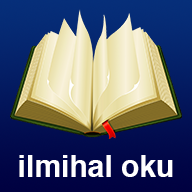
<style>
.page{position:relative;width:192px;height:192px}
.page>*{position:absolute;margin:0}
.t1{font:30px "Helvetica-Bold";color:#ffffff}
</style>
<div class="page">
<p class="t1" style="left:19px;top:155px;width:154px;height:22px">ilmihal oku</p>
</div>
